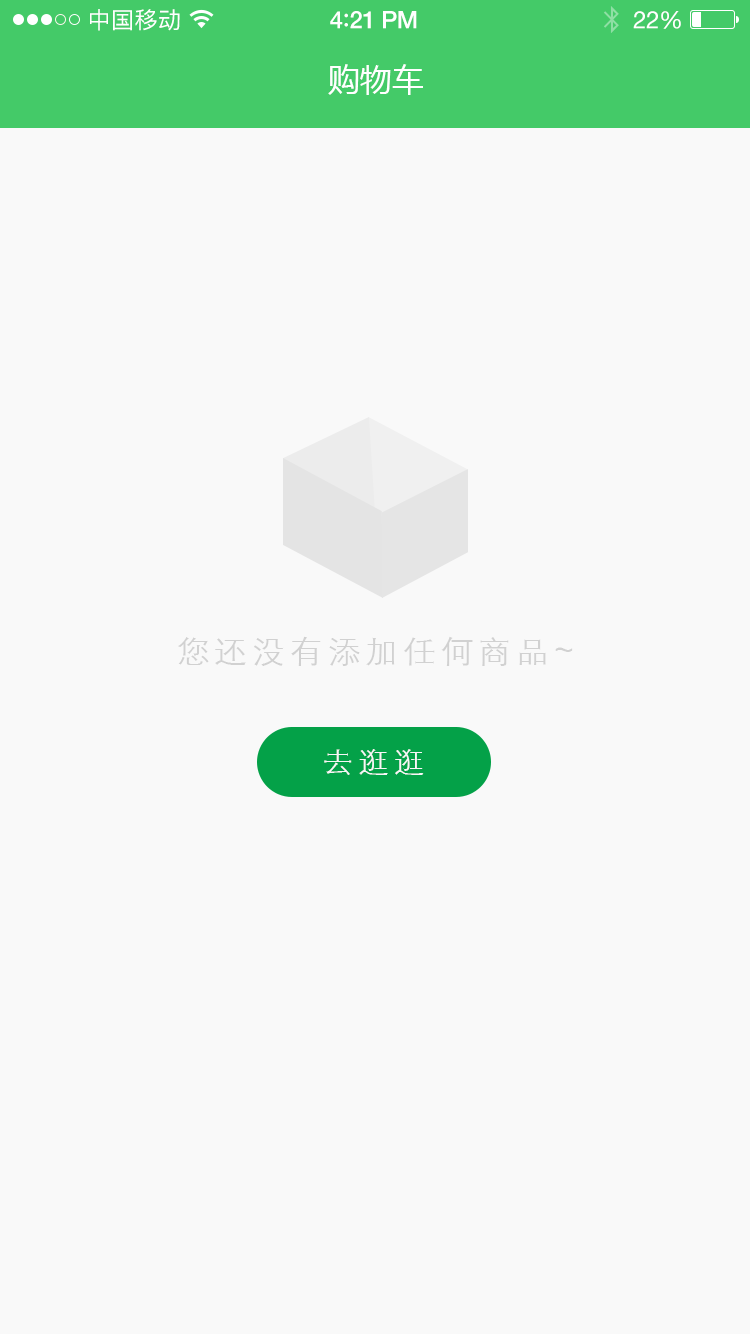
<style>
.page{position:relative;width:750px;height:1334px;background:#f9f9f9}
.page>*{position:absolute;margin:0}
.t1{font:23px "PingFangSC-Regular";letter-spacing:0.02em;color:#ffffff}
.t2{font:24px "HelveticaNeue-Medium";letter-spacing:-0.02em;color:#ffffff}
.t3{font:26px "Avenir-Medium";letter-spacing:-0.02em;color:#ffffff}
.t4{font:24px "HelveticaNeue";letter-spacing:-0.02em;color:#ffffff}
.t5{font:32px "MicrosoftYaHei";color:#ffffff;text-transform:uppercase}
.t6{font:31.4px "STXihei";letter-spacing:0.15em;color:#d1d1d1;text-transform:uppercase;scale:1.05 1}
.t7{font:29.4px "STXihei";letter-spacing:0.15em;color:#f7f7f7;text-transform:uppercase;scale:1.05 1}
</style>
<div class="page">
<p class="t1" style="left:90px;top:9px;width:90px;height:22px">中国移动</p>
<p class="t2" style="left:330px;top:11px;width:87px;height:18px">4<span class="t3">:</span>21 PM</p>
<p class="t4" style="left:633px;top:11px;width:48px;height:18px">22%</p>
<p class="t5" style="left:328px;top:64px;width:95px;height:31px">购物车</p>
<p class="t6" style="left:178px;top:636px;width:395px;height:30px">您还没有添加任何商品~</p>
<p class="t7" style="left:324px;top:749px;width:100px;height:26px">去逛逛</p>
</div>
